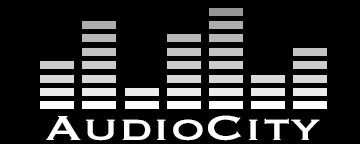
<style>
.page{position:relative;width:360px;height:144px;background:#000000}
.page>*{position:absolute;margin:0}
.t1{font:45.8px "Copperplate";color:#ffffff;scale:1.21 1}
</style>
<div class="page">
<p class="t1" style="left:46px;top:115px;width:274px;height:26px">AudioCity</p>
</div>
